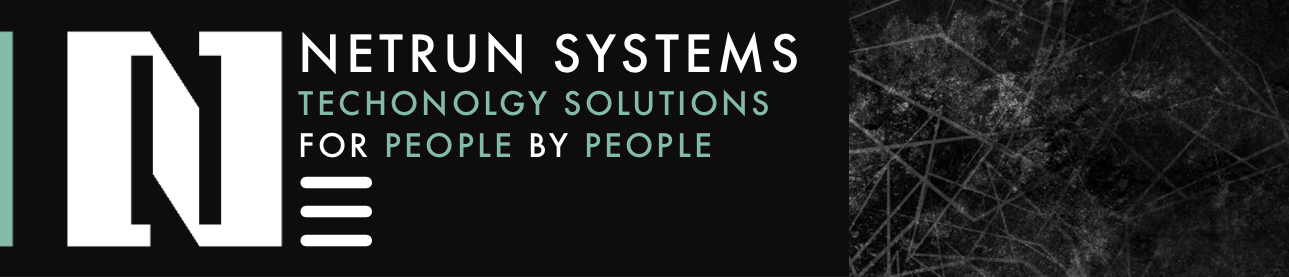
<style>
.page{position:relative;width:1289px;height:277px;background:#0e0c0c}
.page>*{position:absolute;margin:0}
.t1{font:31.6px "Futura-Medium";color:#84baaa}
.t2{font:50px "Futura-Medium";color:#fffffe}
.t3{font:31.6px "Futura-Medium";color:#fffffe}
</style>
<div class="page">
<p class="t1" style="left:0px;top:0px;width:1289px;height:277px"><span class="t2">NETRUN SYSTEMS<br></span>TECHONOLGY SOLUTIONS<br><span class="t3">FOR</span> PEOPLE <span class="t3">BY</span> PEOPLE</p>
</div>
